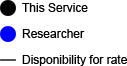
<style>
.page{position:relative;width:127px;height:66px;background:#ffffff}
.page>*{position:absolute;margin:0}
.t1{font:12px "ArialMT";color:#000000}
</style>
<div class="page">
<p class="t1" style="left:22px;top:3px;width:66px;height:9px">This Service</p>
<p class="t1" style="left:22px;top:29px;width:63px;height:9px">Researcher</p>
<p class="t1" style="left:22px;top:55px;width:105px;height:11px">Disponibility for rate</p>
</div>
